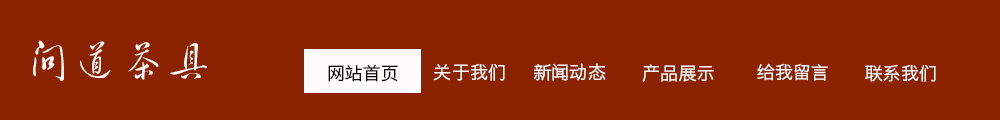
<style>
.page{position:relative;width:1000px;height:120px;background:#8c2300}
.page>*{position:absolute;margin:0}
.t1{font:48px "GJJHCJW--GB1-0";color:#faf8f8}
.t2{font:18px "HiraginoSansGB-W3";color:#060606}
.t3{font:18px "HiraginoSansGB-W3";color:#faf8f8}
</style>
<div class="page">
<p class="t1" style="left:33px;top:40px;width:174px;height:41px">问道茶具</p>
<p class="t2" style="left:328px;top:64px;width:70px;height:18px">网站首页</p>
<p class="t3" style="left:433px;top:63px;width:72px;height:18px">关于我们</p>
<p class="t3" style="left:534px;top:63px;width:72px;height:18px">新闻动态</p>
<p class="t3" style="left:642px;top:64px;width:72px;height:18px">产品展示</p>
<p class="t3" style="left:757px;top:63px;width:71px;height:18px">给我留言</p>
<p class="t3" style="left:865px;top:64px;width:71px;height:18px">联系我们</p>
</div>
